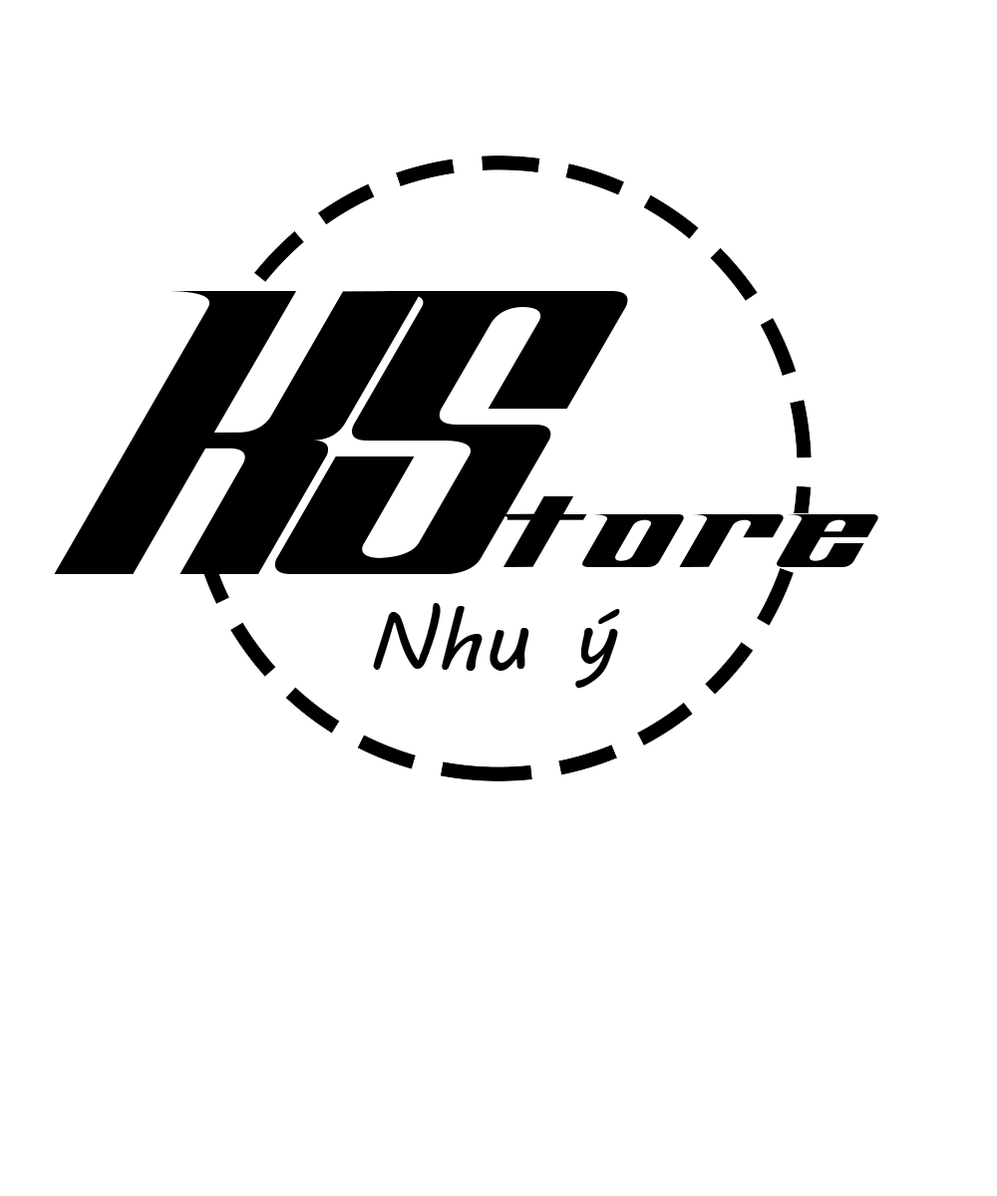
<style>
.page{position:relative;width:997px;height:1196px;background:#ffffff}
.page>*{position:absolute;margin:0}
.t1{font:439.4px "AddSpeedy";letter-spacing:-0.24em;color:#000000}
.t2{font:164.1px "AddSpeedy";color:#000000}
.t3{font:85.7px "MVBoli";color:#000000}
</style>
<div class="page">
<p class="t1" style="left:54px;top:291px;width:574px;height:283px">KS</p>
<p class="t2" style="left:492px;top:496px;width:386px;height:71px">tore</p>
<p class="t3" style="left:373px;top:603px;width:247px;height:85px">Nhu ý</p>
</div>
